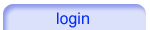
<style>
.page{position:relative;width:150px;height:30px;background:#dce1fb}
.page>*{position:absolute;margin:0}
.t1{font:16px "ArialMT";color:#092ff6}
</style>
<div class="page">
<p class="t1" style="left:57px;top:12px;width:32px;height:16px">login</p>
</div>
